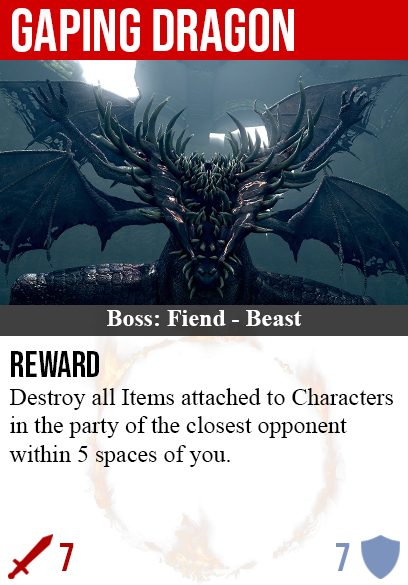
<style>
.page{position:relative;width:408px;height:585px;background:#ffffff}
.page>*{position:absolute;margin:0}
.t1{font:60px "BebasNeue-Regular";color:#ffffff}
.t2{font:24px "TimesNewRomanPS-BoldMT";color:#ffffff}
.t3{font:36px "BebasNeue-Regular";color:#000000}
.t4{font:24px "TimesNewRomanPSMT";color:#000000}
.t5{font:40px "BebasNeue-Regular";color:#af0202}
.t6{font:40px "BebasNeue-Regular";color:#7c94bd}
</style>
<div class="page">
<p class="t1" style="left:12px;top:8px;width:282px;height:44px">gaping dragon</p>
<p class="t2" style="left:107px;top:310px;width:195px;height:16px">Boss: Fiend - Beast</p>
<p class="t3" style="left:11px;top:351px;width:88px;height:26px">reward</p>
<p class="t4" style="left:9px;top:388px;width:384px;height:79px">Destroy all Items attached to Characters<br>in the party of the closest opponent<br>within 5 spaces of you.</p>
<p class="t5" style="left:60px;top:543px;width:14px;height:28px">7</p>
<p class="t6" style="left:336px;top:543px;width:14px;height:28px">7</p>
</div>
